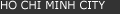
<style>
.page{position:relative;width:120px;height:14px;background:#333333}
.page>*{position:absolute;margin:0}
.t1{font:11px "MSReferenceSansSerif";color:#ffffff}
</style>
<div class="page">
<p class="t1" style="left:1px;top:0px;width:104px;height:10px">HO CHI MINH CITY</p>
</div>
